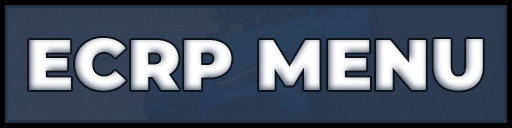
<style>
.page{position:relative;width:512px;height:128px}
.page>*{position:absolute;margin:0}
.t1{font:72px "Montserrat-Black";color:#ffffff}
</style>
<div class="page">
<p class="t1" style="left:29px;top:38px;width:454px;height:53px">ECRP MENU</p>
</div>
